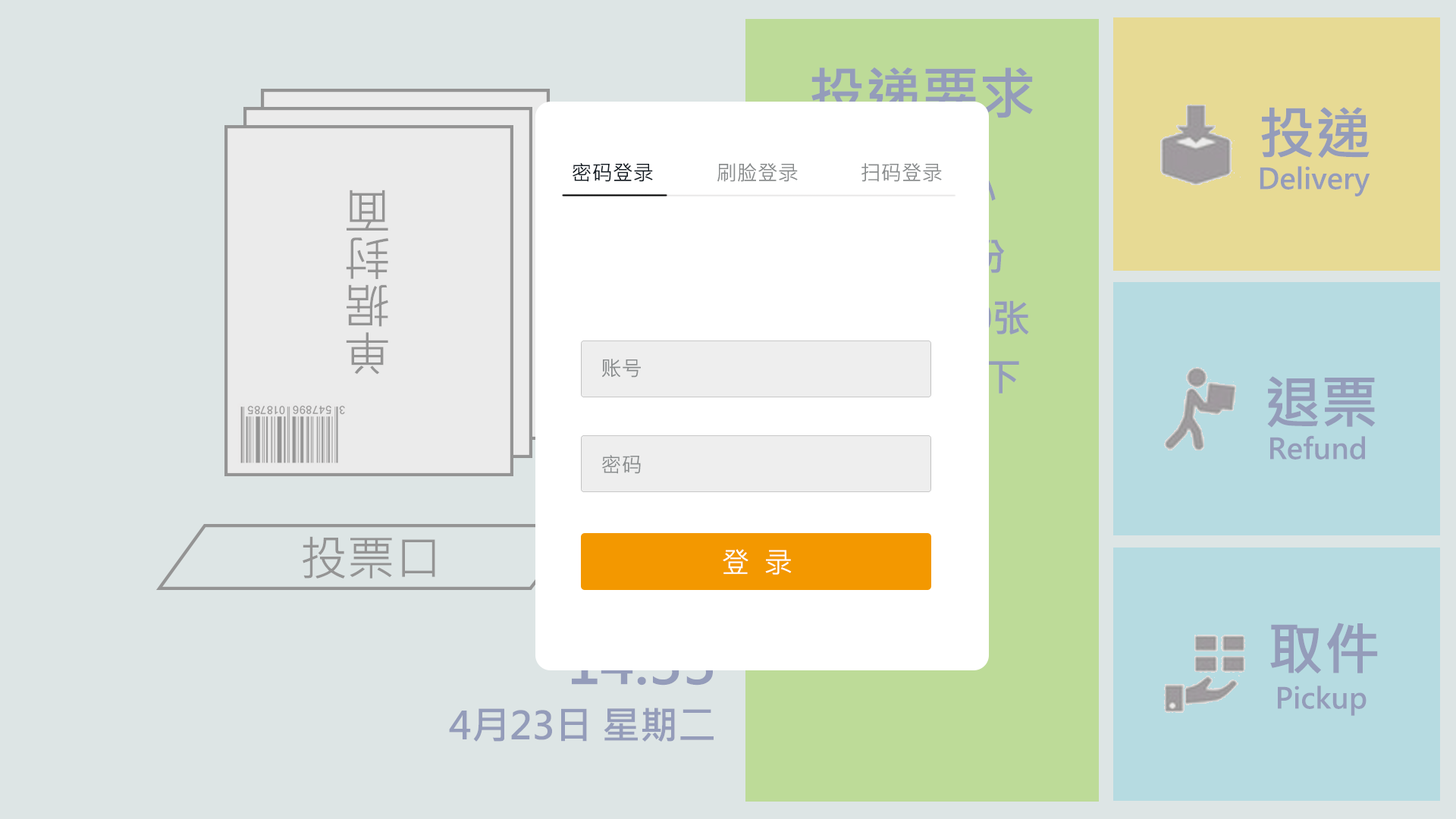
<style>
.page{position:relative;width:1456px;height:819px;background:#dde5e5}
.page>*{position:absolute;margin:0}
.t1{font:56.9px "MicrosoftJhengHeiBold";color:#949cba}
.t2{font:20.5px "MicrosoftJhengHeiRegular";color:#101820}
.t3{font:20.5px "MicrosoftJhengHeiRegular";color:#898c8d}
.t4{font:28.4px "MicrosoftJhengHeiBold";color:#949cba}
.t5{font:47.4px "MicrosoftJhengHeiRegular";color:#949494}
.t6{font:28.4px "MicrosoftJhengHeiRegular";color:#ffffff}
.t7{font:56.9px "MicrosoftJhengHeiBold"}
.t8{font:37.9px "MicrosoftJhengHeiBold";color:#949cba}
</style>
<div class="page">
<p class="t1" style="left:811px;top:67px;width:222px;height:51px">投递要求</p>
<p class="t1" style="left:1261px;top:107px;width:109px;height:51px">投递</p>
<p class="t2" style="left:573px;top:163px;width:80px;height:19px">密码登录</p>
<p class="t3" style="left:717px;top:163px;width:81px;height:19px">刷脸登录</p>
<p class="t3" style="left:861px;top:163px;width:81px;height:19px">扫码登录</p>
<p class="t4" style="left:1260px;top:166px;width:110px;height:30px">Delivery</p>
<p class="t5" style="left:346px;top:190px;width:43px;height:185px;rotate:180deg">单据封面</p>
<p class="t3" style="left:602px;top:359px;width:39px;height:19px">账号</p>
<p class="t1" style="left:1267px;top:376px;width:109px;height:52px">退票</p>
<p class="t4" style="left:1270px;top:435px;width:95px;height:25px">Refund</p>
<p class="t3" style="left:602px;top:455px;width:39px;height:19px">密码</p>
<p class="t5" style="left:303px;top:536px;width:132px;height:43px">投票口</p>
<p class="t6" style="left:723px;top:549px;width:69px;height:26px">登  录</p>
<p class="t1" style="left:1270px;top:623px;width:108px;height:51px">取件</p>
<p class="t7" style="left:571px;top:640px;width:142px;height:46px">14:33</p>
<p class="t4" style="left:1278px;top:686px;width:88px;height:30px">Pickup</p>
<p class="t8" style="left:449px;top:708px;width:265px;height:34px">4月23日 星期二</p>
</div>
